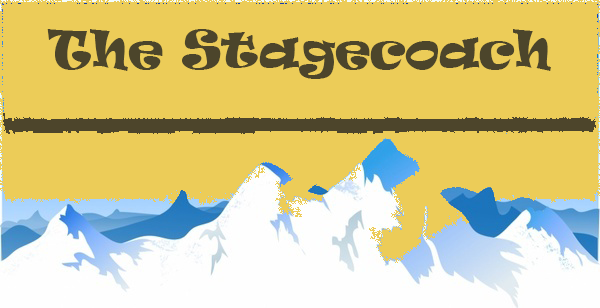
<style>
.page{position:relative;width:600px;height:308px;background:#eccc58}
.page>*{position:absolute;margin:0}
.t1{font:48px "Ravie";color:#4c452b}
</style>
<div class="page">
<p class="t1" style="left:47px;top:29px;width:504px;height:50px">The Stagecoach</p>
</div>
